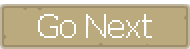
<style>
.page{position:relative;width:190px;height:49px;background:#bcaa7f}
.page>*{position:absolute;margin:0}
.t1{font:16px "pix-PixelFJVerdana12pt-Regular";color:#ffffff}
</style>
<div class="page">
<p class="t1" style="left:38px;top:14px;width:114px;height:24px">Go Next</p>
</div>
